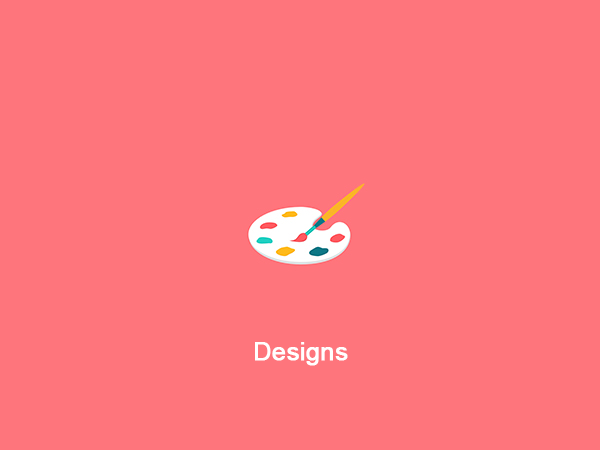
<style>
.page{position:relative;width:600px;height:450px;background:#fe757c}
.page>*{position:absolute;margin:0}
.t1{font:25px "ArialMT";color:#ffffff;font-weight:bold}
</style>
<div class="page">
<p class="t1" style="left:255px;top:342px;width:93px;height:24px">Designs</p>
</div>
